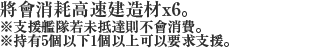
<style>
.page{position:relative;width:318px;height:48px;background:#ffffff}
.page>*{position:absolute;margin:0}
.t1{font:14px/14px "RyuminPr6N-Bold";color:#2e2e2e}
.t2{font:18px/20px "RyuminPr6N-Bold";color:#2e2e2e}
</style>
<div class="page">
<p class="t1" style="left:0px;top:0px;width:229px;height:48px"><span class="t2">將會消耗高速建造材x6。<br></span>※支援艦隊若未抵達則不會消費。<br>※持有5個以下1個以上可以要求支援。</p>
</div>
